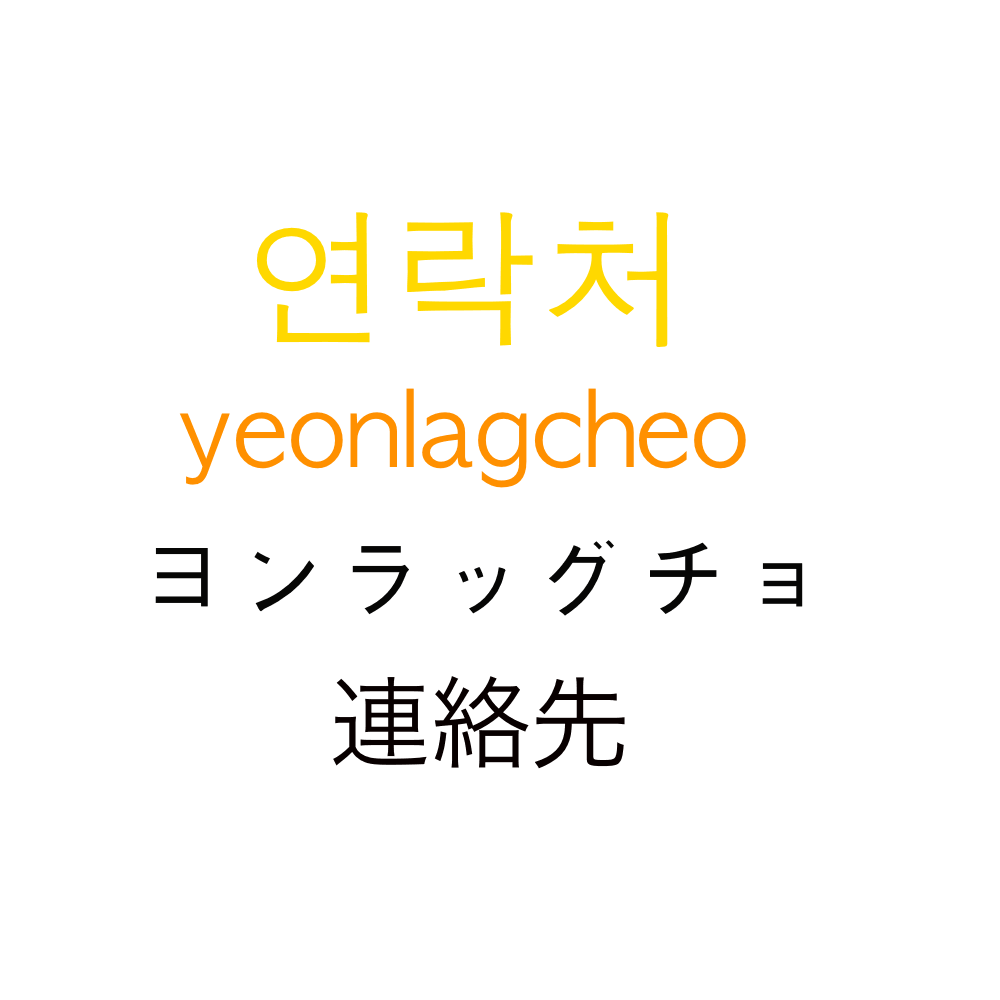
<style>
.page{position:relative;width:1000px;height:1000px;background:#ffffff}
.page>*{position:absolute;margin:0}
.t1{font:150px "AppleGothic";color:#ffd800}
.t2{font:100px "AppleGothic";color:#ff9000}
.t3{font:100px "AppleGothic";color:#060605}
.t4{font:100px "HiraKakuProN-W3";color:#080000}
</style>
<div class="page">
<p class="t1" style="left:256px;top:212px;width:413px;height:135px">연락처</p>
<p class="t2" style="left:179px;top:388px;width:567px;height:100px">yeonlagcheo</p>
<p class="t3" style="left:155px;top:540px;width:648px;height:76px">ヨンラッグチョ</p>
<p class="t4" style="left:333px;top:676px;width:292px;height:93px">連絡先</p>
</div>
